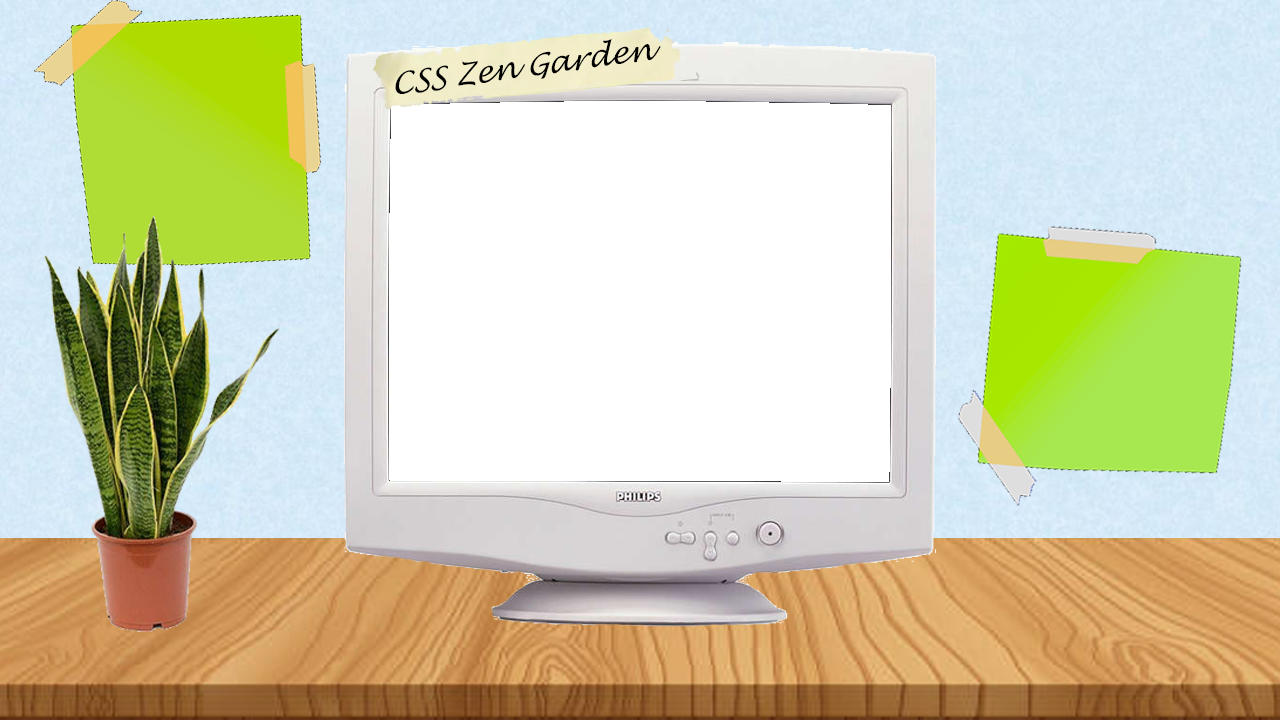
<style>
.page{position:relative;width:1280px;height:720px;background:#ffffff}
.page>*{position:absolute;margin:0}
.t1{font:30px "LucidaHandwriting-Italic";color:#000000;font-style:italic}
</style>
<div class="page">
<p class="t1" style="left:395px;top:39px;width:266px;height:55px;rotate:-8deg">CSS Zen Garden</p>
</div>
